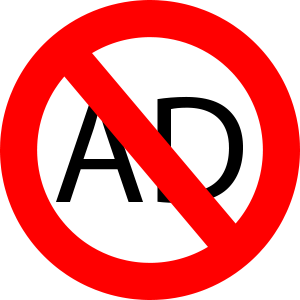
<style>
.page{position:relative;width:300px;height:300px;background:#ffffff}
.page>*{position:absolute;margin:0}
.t1{font:154.2px "MyriadPro-Regular";color:#000000}
</style>
<div class="page">
<p class="t1" style="left:56px;top:96px;width:187px;height:107px">AD</p>
</div>
